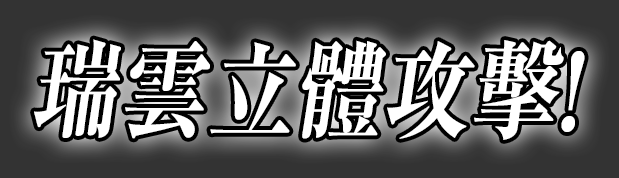
<style>
.page{position:relative;width:619px;height:178px;background:#333333}
.page>*{position:absolute;margin:0}
.t1{font:106px "RyuminPr6N-ExBold";color:#ffffff;font-style:italic;scale:0.83 1}
</style>
<div class="page">
<p class="t1" style="left:34px;top:39px;width:551px;height:101px">瑞雲立體攻擊!</p>
</div>
